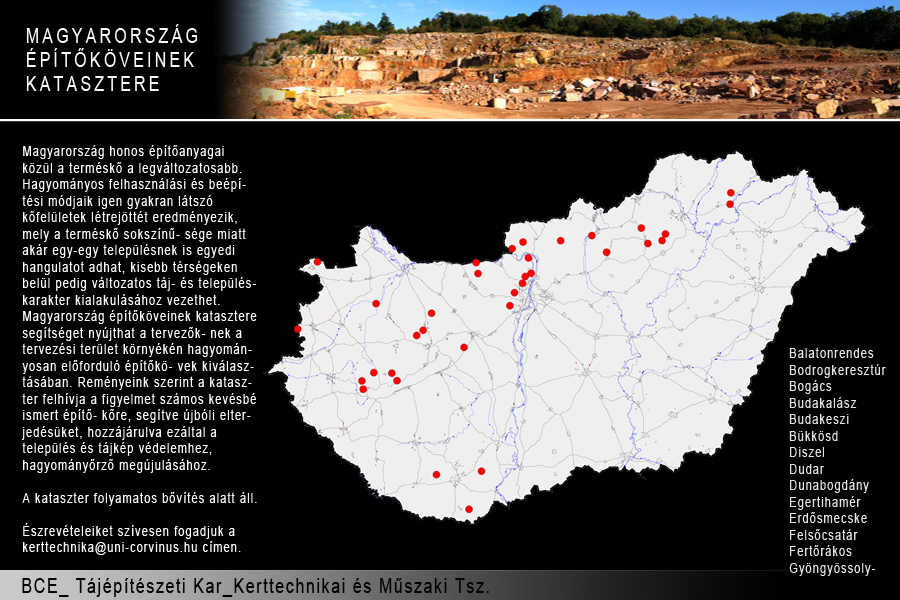
<style>
.page{position:relative;width:900px;height:600px;background:#000000}
.page>*{position:absolute;margin:0}
.t1{font:20px "ArialMT";letter-spacing:0.2em;color:#fdfcfc;scale:0.8 1}
.t2{font:13.7px "ArialMT";letter-spacing:0.1em;color:#fefdfd;scale:0.8 1}
.t3{font:13.8px "ArialMT";letter-spacing:0.1em;color:#e5e5e5;scale:0.8 1}
.t4{font:20px "ArialMT";letter-spacing:0.1em;color:#000000;scale:0.8 1}
</style>
<div class="page">
<p class="t1" style="left:26px;top:24px;width:172px;height:67px">MAGYARORSZÁG<br>ÉPÍTŐKÖVEINEK <br>KATASZTERE</p>
<p class="t2" style="left:21px;top:145px;width:236px;height:410px">Magyarország honos építőanyagai közül a terméskő a legváltozatosabb. Hagyományos felhasználási és beépítési módjaik igen gyakran látszó kőfelületek létrejöttét eredményezik, mely a terméskő sokszínű- sége miatt akár egy-egy településnek is egyedi hangulatot adhat, kisebb térségeken belül pedig változatos táj- és településkarakter kialakulásához vezethet. <br>Magyarország építőköveinek katasztere segítséget nyújthat a tervezők- nek a tervezési terület környékén hagyományosan előforduló építőkö- vek kiválasztásában. Reményeink szerint a kataszter felhívja a figyelmet számos kevésbé ismert építő- kőre, segítve újbóli elterjedésüket, hozzájárulva ezáltal a település és tájkép védelemhez, hagyományőrző megújulásához. <br><br>A kataszter folyamatos bővítés alatt áll. <br><br>Észrevételeiket szívesen fogadjuk a kerttechnika@uni-corvinus.hu címen.</p>
<p class="t3" style="left:789px;top:347px;width:97px;height:229px">Balatonrendes<br>Bodrogkeresztúr<br>Bogács<br>Budakalász<br>Budakeszi<br>Bükkösd<br>Diszel<br>Dudar<br>Dunabogdány<br>Egertihamér<br>Erdősmecske<br>Felsőcsatár<br>Fertőrákos<br>Gyöngyössolymos<br>Hárskút<br>Karmacs<br>Keszthely<br>Lókút<br>Nagyharsány<br>Nagyvisnyó<br>Polgárdi<br>Sóskút<br>Süttő<br>Szanda<br>Szob<br>Szokolya<br>Tar<br>Tardos (Bükk)<br>Tardosbánya<br>Uzsabánya<br>Üröm</p>
<p class="t4" style="left:22px;top:578px;width:467px;height:19px">BCE_ Tájépítészeti Kar_Kerttechnikai és Műszaki Tsz.</p>
</div>
